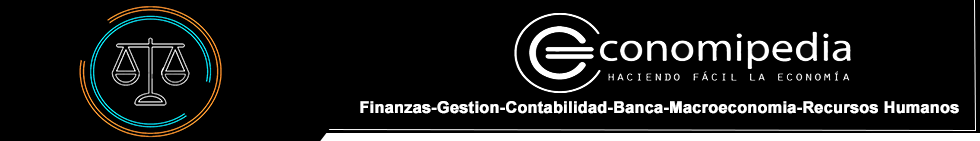
<style>
.page{position:relative;width:980px;height:141px;background:#000000}
.page>*{position:absolute;margin:0}
.t1{font:16px "Arial-BoldMT";color:#ffffff;font-weight:bold}
</style>
<div class="page">
<p class="t1" style="left:360px;top:101px;width:599px;height:13px">Finanzas-Gestion-Contabilidad-Banca-Macroeconomia-Recursos Humanos</p>
</div>
